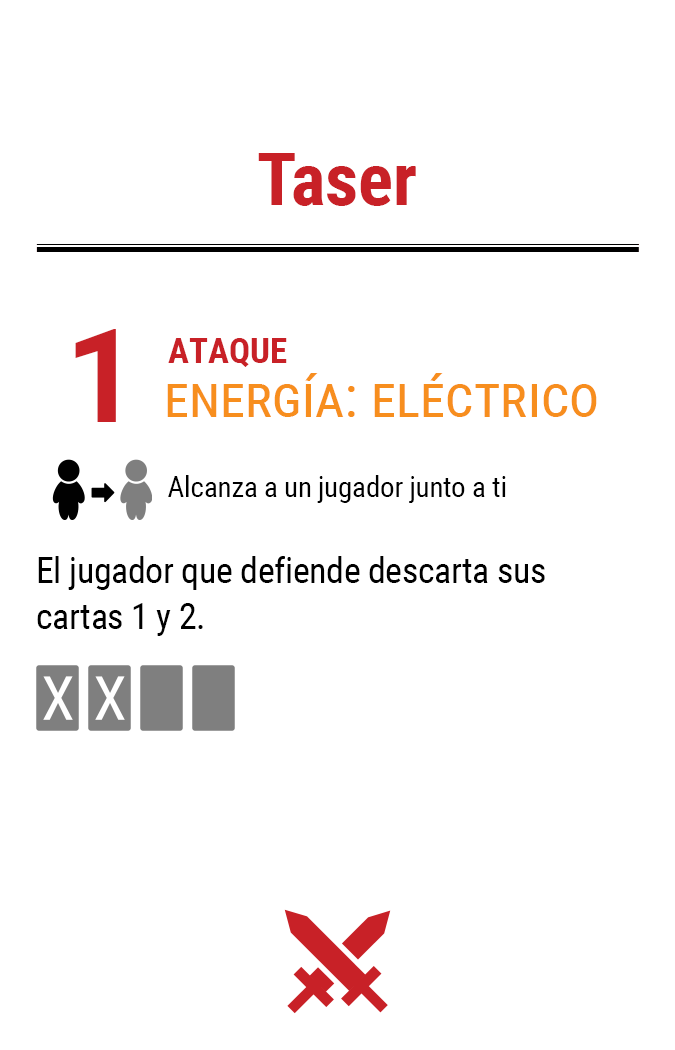
<style>
.page{position:relative;width:675px;height:1050px;background:#ffffff}
.page>*{position:absolute;margin:0}
.t1{font:72.9px "RobotoCondensed-Bold";color:#c82127}
.t2{font:130px "Roboto-Bold";letter-spacing:-0.06em;color:#c82127}
.t3{font:35px "RobotoCondensed-Bold";color:#c82127}
.t4{font:58.3px "RobotoCondensed-Regular";color:#f78e1e;font-variant:small-caps}
.t5{font:29.2px "RobotoCondensed-Regular";letter-spacing:-0.01em;color:#000000}
.t6{font:35.8px/45.8px "RobotoCondensed-Regular";letter-spacing:-0.01em;color:#000000}
</style>
<div class="page">
<p class="t1" style="left:258px;top:153px;width:158px;height:53px">Taser</p>
<p class="t2" style="left:75px;top:329px;width:41px;height:93px">1</p>
<p class="t3" style="left:168px;top:338px;width:119px;height:29px">ATAQUE</p>
<p class="t4" style="left:167px;top:373px;width:430px;height:44px">energía: eléctrico</p>
<p class="t5" style="left:168px;top:475px;width:338px;height:28px">Alcanza a un jugador junto a ti</p>
<p class="t6" style="left:37px;top:556px;width:508px;height:80px">El jugador que defiende descarta sus cartas 1 y 2.</p>
</div>
